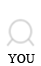
<style>
.page{position:relative;width:41px;height:66px;background:#ffffff}
.page>*{position:absolute;margin:0}
.t1{font:12.1px "IskoolaPota";color:#000000}
</style>
<div class="page">
<p class="t1" style="left:8px;top:54px;width:27px;height:9px">YOU</p>
</div>
